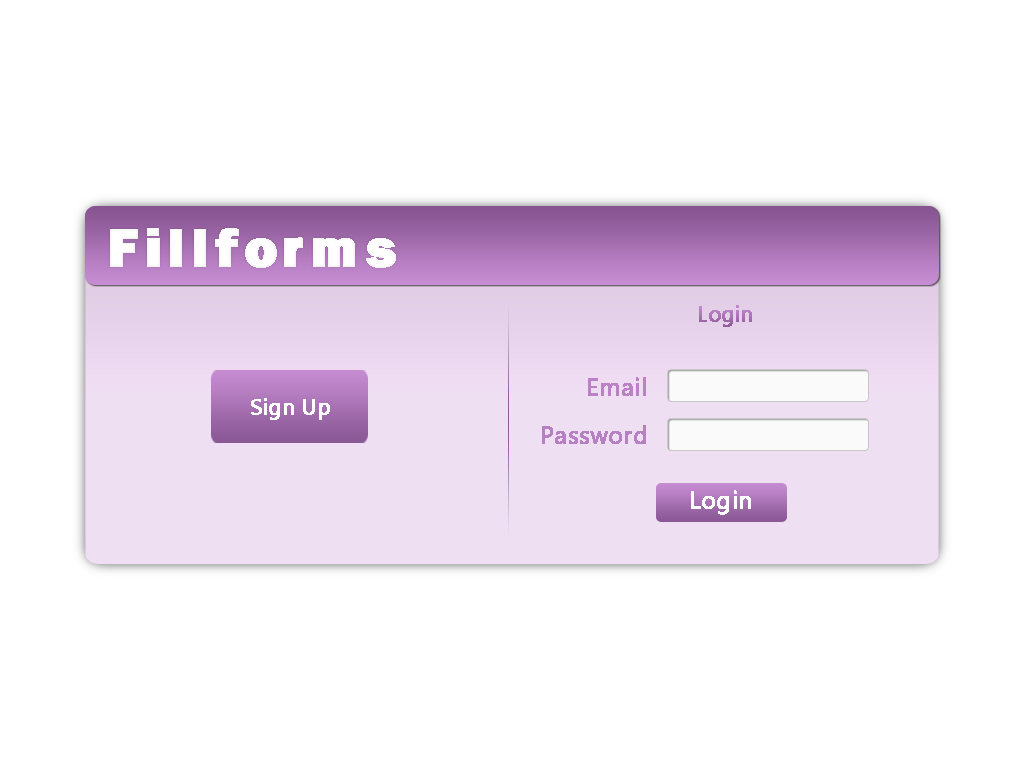
<style>
.page{position:relative;width:1024px;height:768px;background:#ffffff}
.page>*{position:absolute;margin:0}
.t1{font:54.1px "FranklinGothicLT-Heavy";letter-spacing:0.12em;color:#ffffff;font-weight:bold}
.t2{font:21.3px "SegoeUI";color:#a973b4;font-weight:bold}
.t3{font:23.7px "SegoeUI";color:#ba82c5;font-weight:bold}
.t4{font:21.3px "SegoeUI";color:#ffffff;font-weight:bold}
.t5{font:23.7px "SegoeUI";color:#b780c3;font-weight:bold}
.t6{font:23.7px "SegoeUI";color:#fdfcfc;font-weight:bold}
</style>
<div class="page">
<p class="t1" style="left:110px;top:228px;width:286px;height:40px">Fillforms</p>
<p class="t2" style="left:699px;top:305px;width:53px;height:22px">Login</p>
<p class="t3" style="left:588px;top:377px;width:58px;height:19px">Email</p>
<p class="t4" style="left:251px;top:398px;width:79px;height:22px">Sign Up</p>
<p class="t5" style="left:542px;top:425px;width:104px;height:19px">Password</p>
<p class="t6" style="left:691px;top:490px;width:60px;height:25px">Login</p>
</div>
